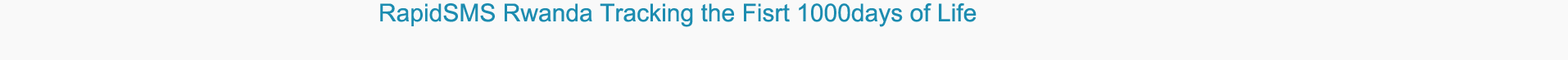
<style>
.page{position:relative;width:1568px;height:60px;background:#f9f9f9}
.page>*{position:absolute;margin:0}
.t1{font:24.6px "ArialMT";color:#1c8cb0}
</style>
<div class="page">
<p class="t1" style="left:380px;top:3px;width:597px;height:24px">RapidSMS Rwanda Tracking the Fisrt 1000days of Life</p>
</div>
